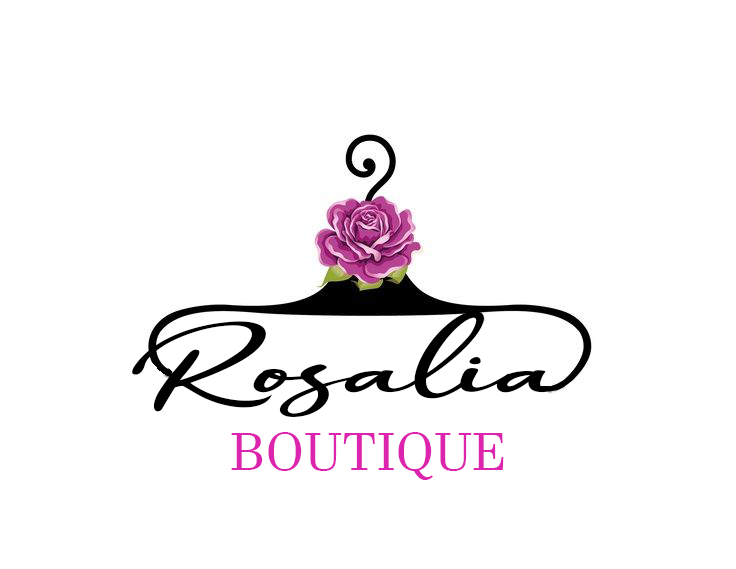
<style>
.page{position:relative;width:736px;height:569px;background:#ffffff}
.page>*{position:absolute;margin:0}
.t1{font:87.4px "CristalisticScript";color:#010000;scale:1.97 1}
.t2{font:51.8px "JavaneseText";color:#dd24ae}
</style>
<div class="page">
<p class="t1" style="left:132px;top:311px;width:443px;height:106px">Rosalia</p>
<p class="t2" style="left:231px;top:432px;width:273px;height:48px">BOUTIQUE</p>
</div>
